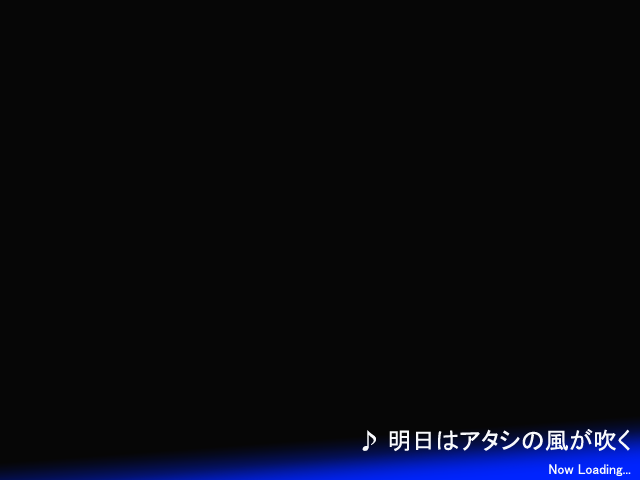
<style>
.page{position:relative;width:640px;height:480px;background:#060606}
.page>*{position:absolute;margin:0}
.t1{font:24px "MS-PGothic";color:#f8f9fc}
.t2{font:14px "MS-PGothic";color:#f8f9fc}
</style>
<div class="page">
<p class="t1" style="left:362px;top:429px;width:268px;height:23px">♪ 明日はアタシの風が吹く</p>
<p class="t2" style="left:549px;top:464px;width:82px;height:12px">Now Loading...</p>
</div>
